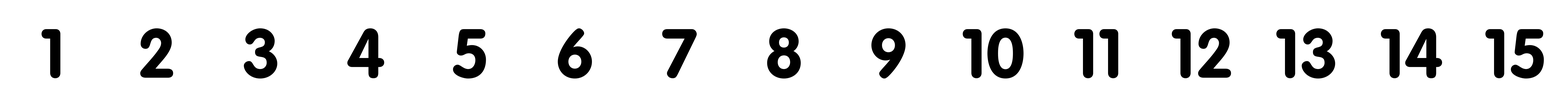
<style>
.page{position:relative;width:1568px;height:105px;background:#ffffff}
.page>*{position:absolute;margin:0}
.t1{font:67.9px "VAGRounded-Bold";color:#000000}
</style>
<div class="page">
<p class="t1" style="left:41px;top:29px;width:19px;height:49px">1</p>
<p class="t1" style="left:140px;top:28px;width:33px;height:49px">2</p>
<p class="t1" style="left:244px;top:28px;width:33px;height:50px">3</p>
<p class="t1" style="left:347px;top:28px;width:37px;height:50px">4</p>
<p class="t1" style="left:453px;top:29px;width:33px;height:49px">5</p>
<p class="t1" style="left:558px;top:28px;width:34px;height:50px">6</p>
<p class="t1" style="left:662px;top:29px;width:35px;height:49px">7</p>
<p class="t1" style="left:767px;top:28px;width:34px;height:50px">8</p>
<p class="t1" style="left:871px;top:28px;width:35px;height:50px">9</p>
<p class="t1" style="left:962px;top:28px;width:62px;height:50px">10</p>
<p class="t1" style="left:1074px;top:29px;width:44px;height:49px">11</p>
<p class="t1" style="left:1172px;top:28px;width:59px;height:50px">12</p>
<p class="t1" style="left:1276px;top:28px;width:59px;height:50px">13</p>
<p class="t1" style="left:1381px;top:28px;width:61px;height:50px">14</p>
<p class="t1" style="left:1485px;top:29px;width:59px;height:49px">15</p>
</div>
